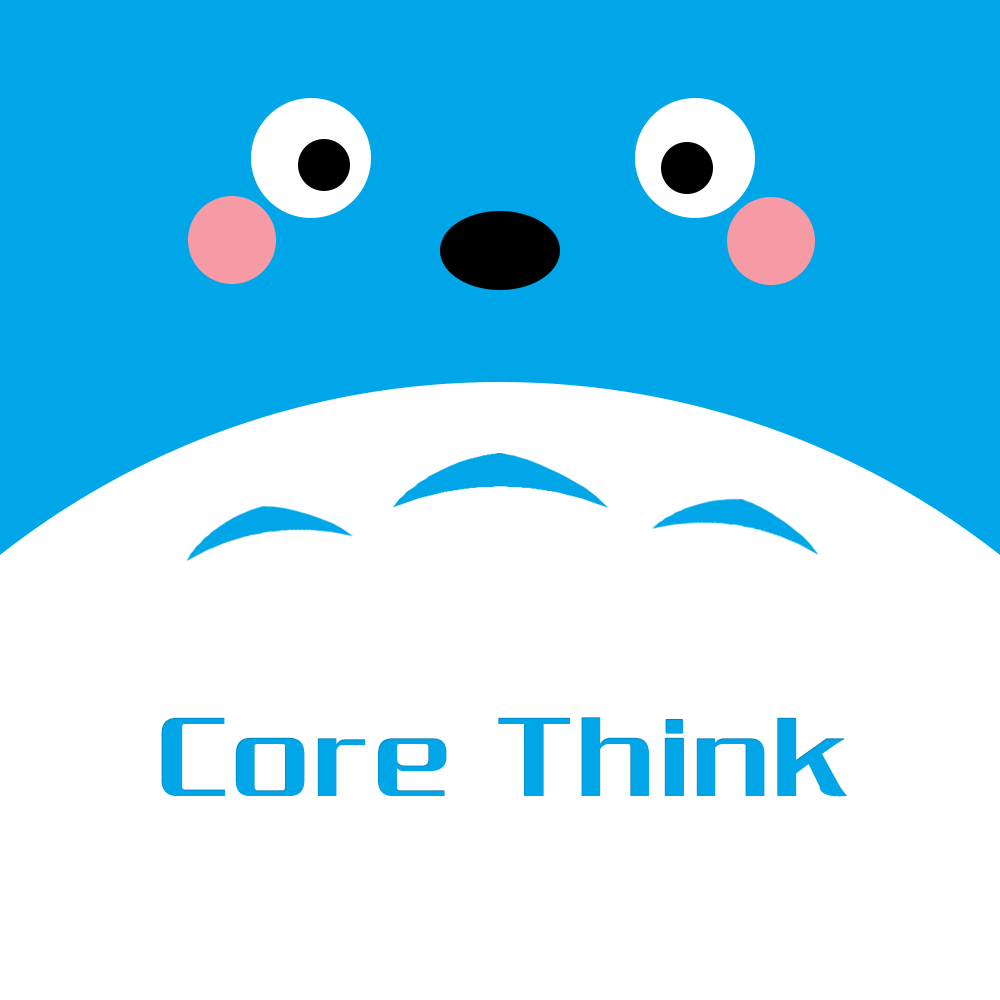
<style>
.page{position:relative;width:1000px;height:1000px;background:#ffffff}
.page>*{position:absolute;margin:0}
.t1{font:120px "FZCQJW--GB1-0";letter-spacing:0.038em;color:#00a6e8;font-weight:bold}
.t2{font:96px "FZCQJW--GB1-0";letter-spacing:0.038em;color:#00a6e8;font-weight:bold}
</style>
<div class="page">
<p class="t1" style="left:161px;top:717px;width:686px;height:80px;text-align:center">Core Think<br><span class="t2"><br>z</span></p>
</div>
